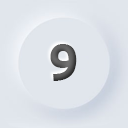
<style>
.page{position:relative;width:128px;height:128px;background:#e1e6ec}
.page>*{position:absolute;margin:0}
.t1{font:52px "Ubuntu-Bold";color:#5a5a5a}
</style>
<div class="page">
<p class="t1" style="left:50px;top:44px;width:27px;height:37px">9</p>
</div>
